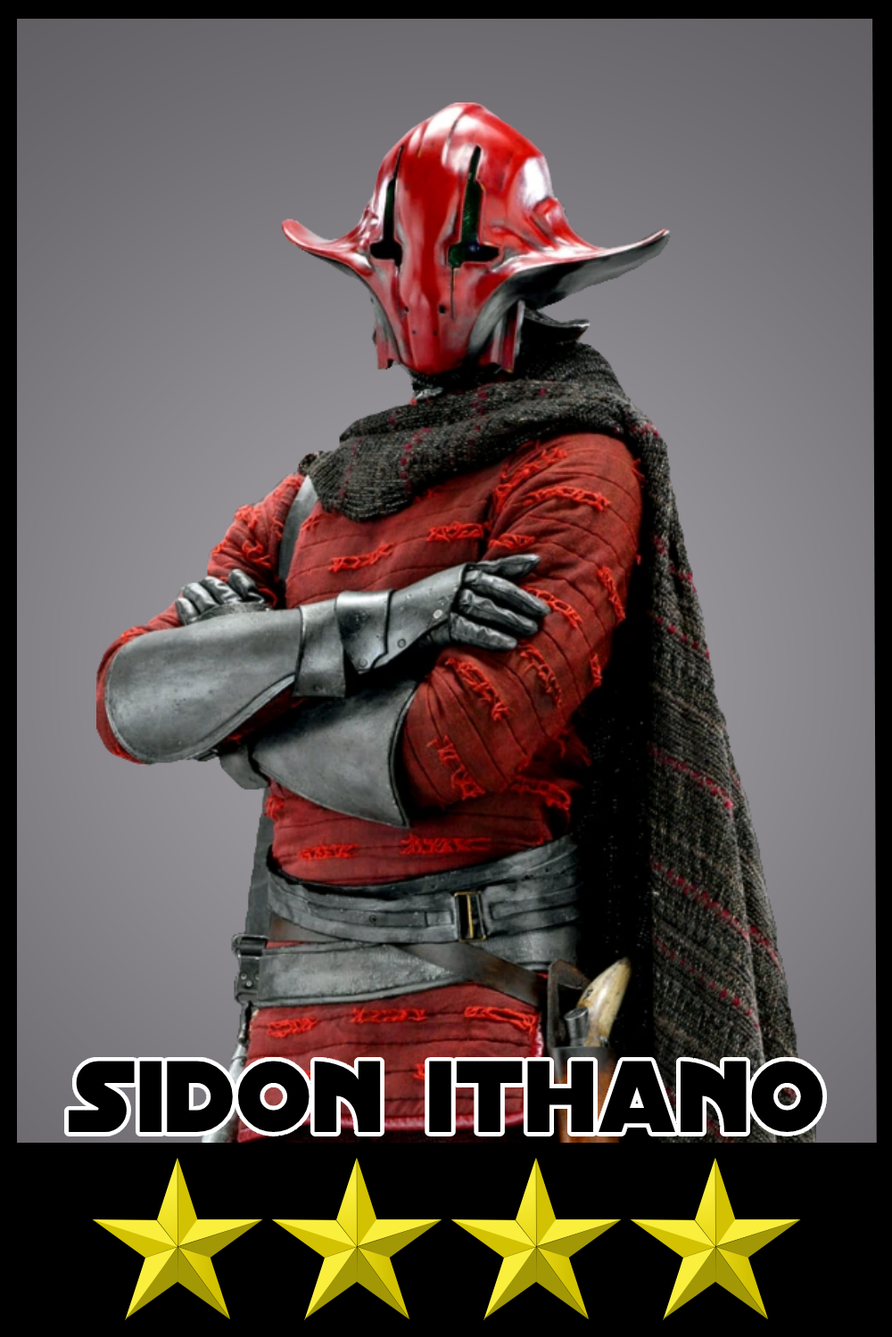
<style>
.page{position:relative;width:892px;height:1337px}
.page>*{position:absolute;margin:0}
.t1{font:109.2px "DistantGalaxy";color:#000000}
</style>
<div class="page">
<p class="t1" style="left:69px;top:1061px;width:754px;height:71px">sidon ithano</p>
</div>
